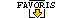
<style>
.page{position:relative;width:72px;height:18px;background:#ffffff}
.page>*{position:absolute;margin:0}
.t1{font:9px "Courier";letter-spacing:0.01em;color:#000000}
</style>
<div class="page">
<p class="t1" style="left:17px;top:2px;width:38px;height:6px">FAVORIS</p>
</div>
